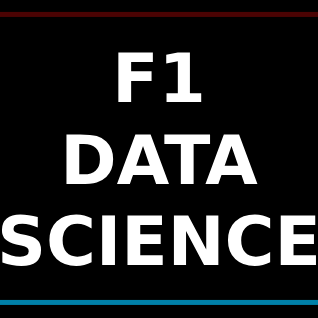
<style>
.page{position:relative;width:318px;height:318px;background:#000000}
.page>*{position:absolute;margin:0}
.t1{font:68px "DejaVuSans-Bold";color:#ffffff}
</style>
<div class="page">
<p class="t1" style="left:1px;top:52px;width:315px;height:214px;text-align:center">F1<br>DATA<br>SCIENCE</p>
</div>
